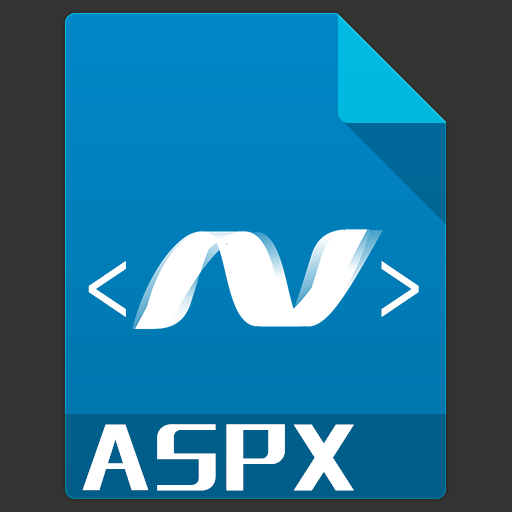
<style>
.page{position:relative;width:512px;height:512px;background:#333333}
.page>*{position:absolute;margin:0}
.t1{font:72px "MFLiHei_Noncommercial-Regular";letter-spacing:0.07em;color:#ffffff}
</style>
<div class="page">
<p class="t1" style="left:82px;top:424px;width:272px;height:67px">ASPX</p>
</div>
